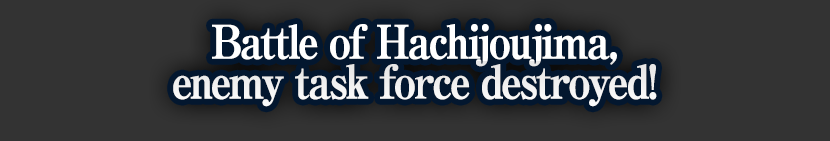
<style>
.page{position:relative;width:830px;height:141px;background:#333333}
.page>*{position:absolute;margin:0}
.t1{font:46px/40px "RyuminPro-ExBold";letter-spacing:-0.08em;color:#ffffff;font-weight:bold;scale:0.9 1}
</style>
<div class="page">
<p class="t1" style="left:173px;top:24px;width:484px;height:83px;text-align:center">Battle of Hachijoujima,<br>enemy task force destroyed!</p>
</div>
